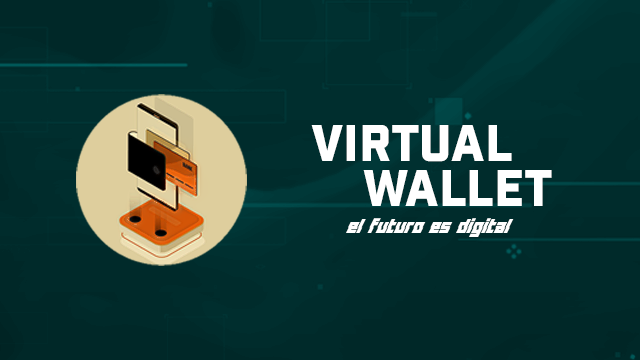
<style>
.page{position:relative;width:640px;height:360px;background:#002e2e}
.page>*{position:absolute;margin:0}
.t1{font:50px "Industry-Black";color:#ffffff}
.t2{font:25px "Distortion-Of-The-Brain-And-Mind";color:#ffffff}
</style>
<div class="page">
<p class="t1" style="left:311px;top:125px;width:201px;height:37px">VIRTUAL</p>
<p class="t1" style="left:363px;top:170px;width:189px;height:36px">WALLET</p>
<p class="t2" style="left:346px;top:218px;width:168px;height:19px">El futuro es digital</p>
</div>
